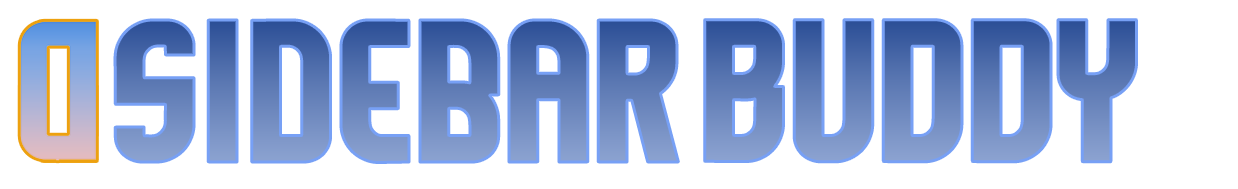
<style>
.page{position:relative;width:1238px;height:189px;background:#ffffff}
.page>*{position:absolute;margin:0}
.t1{font:183.5px "Komikazoom";letter-spacing:0.02em}
</style>
<div class="page">
<p class="t1" style="left:115px;top:20px;width:564px;height:143px">SIDEBAR</p>
<p class="t1" style="left:704px;top:19px;width:433px;height:143px">buddy</p>
</div>
